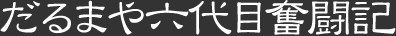
<style>
.page{position:relative;width:396px;height:36px;background:#333333}
.page>*{position:absolute;margin:0}
.t1{font:48px "DFLeiSho-SB-MP-RKSJ-H";letter-spacing:-0.1em;color:#ffffff}
.t2{font:48px "DFLeiSho-SB-MP-RKSJ-H";letter-spacing:-0.2em;color:#ffffff}
.t3{font:48px "DFLeiSho-SB-MP-RKSJ-H";letter-spacing:-0.3em;color:#ffffff}
.t4{font:48px "DFLeiSho-SB-MP-RKSJ-H";letter-spacing:-0.25em;color:#ffffff}
.t5{font:48px "DFLeiSho-SB-MP-RKSJ-H";letter-spacing:-0.15em;color:#ffffff}
</style>
<div class="page">
<p class="t1" style="left:0px;top:0px;width:396px;height:35px"><span class="t2">だ</span><span class="t3">る</span><span class="t4">ま</span><span class="t5">や</span>六<span class="t2">代目</span>奮闘記</p>
</div>
